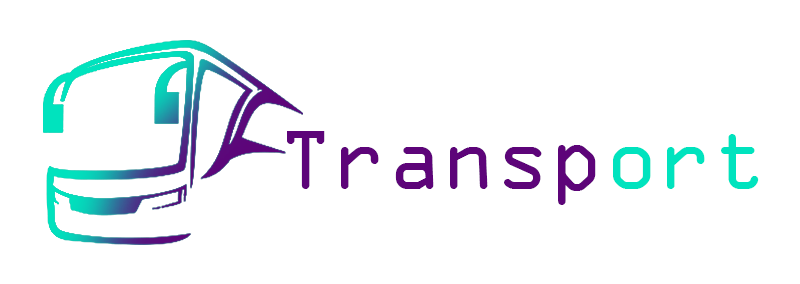
<style>
.page{position:relative;width:800px;height:284px;background:#ffffff}
.page>*{position:absolute;margin:0}
.t1{font:89.9px "OCRAExtended";color:#5d0479}
.t2{font:89.9px "OCRAExtended";color:#00e3be}
</style>
<div class="page">
<p class="t1" style="left:287px;top:131px;width:472px;height:74px">Transp<span class="t2">ort</span></p>
</div>
